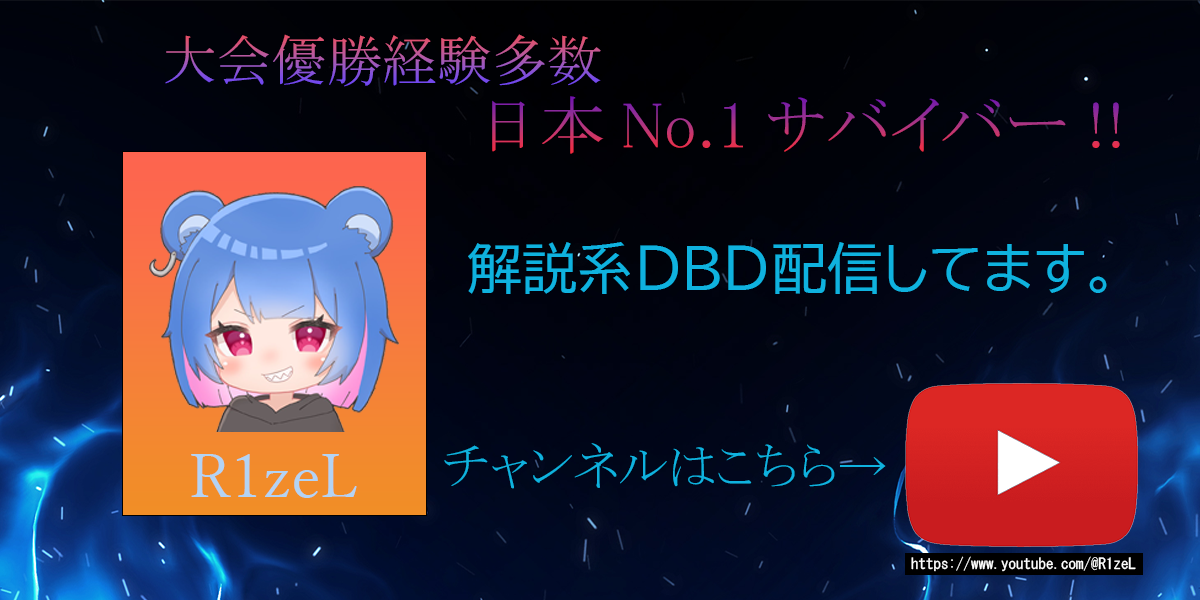
<style>
.page{position:relative;width:1200px;height:600px}
.page>*{position:absolute;margin:0}
.t1{font:55px "MS-PMincho"}
.t2{font:65px "MS-PMincho"}
.t3{font:55px "BIZ-UDPGothic";color:#0fb2df}
.t4{font:50px "MS-PMincho";color:#0fb2df}
.t5{font:60px "YuMincho-Regular";color:#b3d3f4}
.t6{font:15px "MS-Gothic";color:#ffffff}
</style>
<div class="page">
<p class="t1" style="left:165px;top:34px;width:436px;height:53px">大会優勝経験多数</p>
<p class="t2" style="left:492px;top:96px;width:628px;height:58px">日本No.1サバイバー!!</p>
<p class="t3" style="left:468px;top:242px;width:639px;height:52px">解説系DBD配信してます。</p>
<p class="t4" style="left:444px;top:443px;width:442px;height:46px">チャンネルはこちら→</p>
<p class="t5" style="left:191px;top:454px;width:166px;height:44px">R1zeL</p>
<p class="t6" style="left:911px;top:556px;width:225px;height:16px">https://www.youtube.com/@R1zeL</p>
</div>
